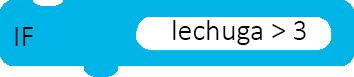
<style>
.page{position:relative;width:354px;height:77px;background:#00b4e8}
.page>*{position:absolute;margin:0}
.t1{font:30px "Calibri-Light";color:#000000}
</style>
<div class="page">
<p class="t1" style="left:15px;top:27px;width:18px;height:19px">IF</p>
<p class="t1" style="left:173px;top:20px;width:133px;height:25px">lechuga &gt; 3</p>
</div>
